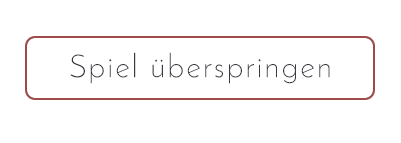
<style>
.page{position:relative;width:401px;height:143px;background:#ffffff}
.page>*{position:absolute;margin:0}
.t1{font:32px "JosefinSans-Light";letter-spacing:0.075em;color:#363940}
</style>
<div class="page">
<p class="t1" style="left:70px;top:52px;width:260px;height:32px">Spiel überspringen</p>
</div>
